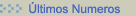
<style>
.page{position:relative;width:136px;height:16px;background:#cdccba}
.page>*{position:absolute;margin:0}
.t1{font:12px "ArialMT";color:#4965bd}
</style>
<div class="page">
<p class="t1" style="left:29px;top:2px;width:91px;height:12px">Últimos Numeros</p>
</div>
